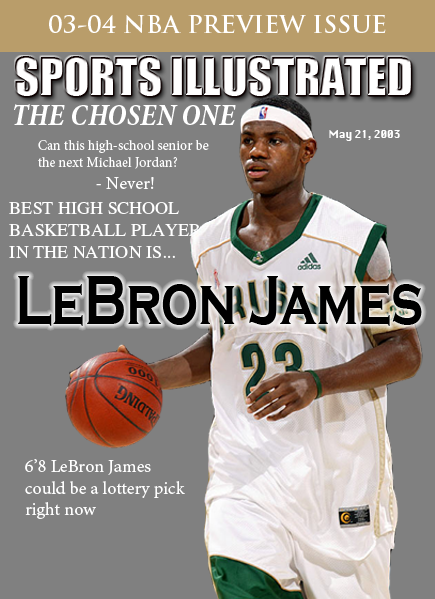
<style>
.page{position:relative;width:435px;height:599px;background:#808080}
.page>*{position:absolute;margin:0}
.t1{font:24px "TrajanPro-Bold";color:#ffffff}
.t2{font:48px "Impact";color:#ffffff}
.t3{font:30px "MinionPro-BoldCnIt";color:#ffffff}
.t4{font:10px "Silom";color:#ffffff}
.t5{font:14px "MinionPro-Regular";color:#ffffff}
.t6{font:18px "MinionPro-Regular";color:#ffffff}
.t7{font:18px "STIXGeneral-Regular";color:#ffffff}
.t8{font:71px "CopperplateGothic-Bold";color:#000000;scale:0.73 1}
</style>
<div class="page">
<p class="t1" style="left:49px;top:15px;width:337px;height:18px">03-04 NBA PREVIEW ISSUE</p>
<p class="t2" style="left:15px;top:56px;width:396px;height:40px">SPORTS ILLUSTRATED</p>
<p class="t3" style="left:14px;top:104px;width:222px;height:21px">THE CHOSEN ONE</p>
<p class="t4" style="left:329px;top:130px;width:71px;height:11px">May 21, 2003</p>
<p class="t5" style="left:38px;top:140px;width:171px;height:29px">Can this high-school senior be <br>the next Michael Jordan?</p>
<p class="t6" style="left:96px;top:177px;width:58px;height:12px">- Never!</p>
<p class="t7" style="left:9px;top:202px;width:192px;height:56px">BEST HIGH SCHOOL<br>BASKETBALL PLAYER<br>IN THE NATION IS...</p>
<p class="t8" style="left:18px;top:276px;width:404px;height:50px">LeBron James</p>
<p class="t6" style="left:25px;top:459px;width:160px;height:60px">6’8 LeBron James <br>could be a lottery pick <br>right now</p>
</div>
